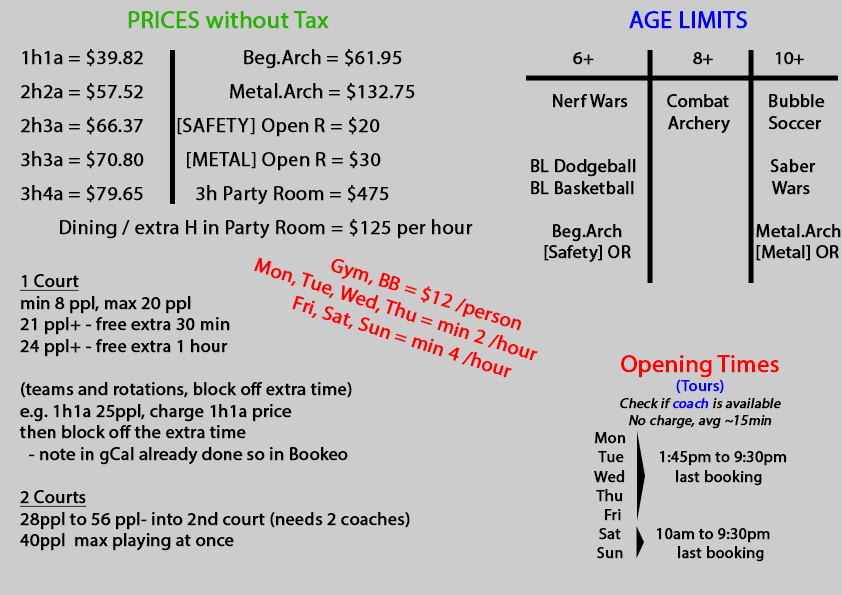
<style>
.page{position:relative;width:842px;height:595px;background:#cccccc}
.page>*{position:absolute;margin:0}
.t1{font:24px "MyriadPro-Regular";color:#2ab200;font-weight:bold}
.t2{font:24px "MyriadPro-Regular";color:#0000ff;font-weight:bold}
.t3{font:18px "MyriadPro-Regular";color:#000000;font-weight:bold}
.t4{font:20px "MyriadPro-Regular";color:#000000;font-weight:bold}
.t5{font:18px "MyriadPro-Regular";color:#000000;font-weight:bold;text-decoration:underline}
.t6{font:20px "MyriadPro-Regular";color:#ff0000;font-weight:bold}
.t7{font:14px "MyriadPro-Regular";color:#000000;font-weight:bold;font-style:italic}
.t8{font:24px "MyriadPro-Regular";color:#ff0000;font-weight:bold}
.t9{font:16px "MyriadPro-Regular";color:#0000ff;font-weight:bold}
.t10{font:14px "MyriadPro-Regular";color:#0000ff;font-weight:bold;font-style:italic}
.t11{font:16px "MyriadPro-Regular";color:#000000;font-weight:bold}
.t12{font:14px "MyriadPro-Regular";color:#ff0000;font-weight:bold;font-style:italic}
</style>
<div class="page">
<p class="t1" style="left:128px;top:11px;width:201px;height:18px">PRICES without Tax</p>
<p class="t2" style="left:629px;top:11px;width:118px;height:18px">AGE LIMITS</p>
<p class="t3" style="left:19px;top:49px;width:454px;height:502px"><span class="t4">1h1a = $39.82<br>2h2a = $57.52<br>2h3a = $66.37<br>3h3a = $70.80<br>3h4a = $79.65<br>        Dining / extra H in Party Room = $125 per hour<br></span><span class="t5"><br>1 Court</span><br>min 8 ppl, max 20 ppl<br>21 ppl+ - free extra 30 min<br>24 ppl+ - free extra 1 hour<br><br>(teams and rotations, block off extra time)<br>e.g. 1h1a 25ppl, charge 1h1a price<br>then block off the extra time<br>  - note in gCal already done so in Bookeo<br><br><span class="t5">2 Courts</span><br>28ppl to 56 ppl- into 2nd court (needs 2 coaches)<br>40ppl  max playing at once</p>
<p class="t4" style="left:177px;top:49px;width:238px;height:156px">Beg.Arch = $61.95<br>           Metal.Arch = $132.75<br>[SAFETY] Open R = $20<br>  [METAL] Open R = $30<br>    3h Party Room = $475</p>
<p class="t3" style="left:531px;top:52px;width:310px;height:211px">6+                       8+              10+<br><br>     Nerf Wars         Combat         Bubble<br>                                Archery         Soccer<br><br>BL Dodgeball                               Saber<br>BL Basketball                                Wars<br><br>     Beg.Arch                               Metal.Arch<br>   [Safety] OR                             [Metal] OR</p>
<p class="t6" style="left:254px;top:257px;width:284px;height:121px;rotate:18deg">Gym, BB = $12 /person<br>Mon, Tue, Wed, Thu = min 2 /hour<br>          Fri, Sat, Sun = min 4 /hour</p>
<p class="t7" style="left:620px;top:355px;width:161px;height:74px;text-align:center"><span class="t8">Opening Times<br></span><span class="t9">(Tours)<br></span>Check if <span class="t10">coach</span> is available<br>No charge, avg ~15min</p>
<p class="t11" style="left:594px;top:432px;width:193px;height:130px"><span class="t12"><br> </span>Mon<br>  Tue         1:45pm to 9:30pm<br> Wed             last booking<br> Thu              <br>   Fri <br>  Sat          10am to 9:30pm<br>  Sun              last booking</p>
</div>
